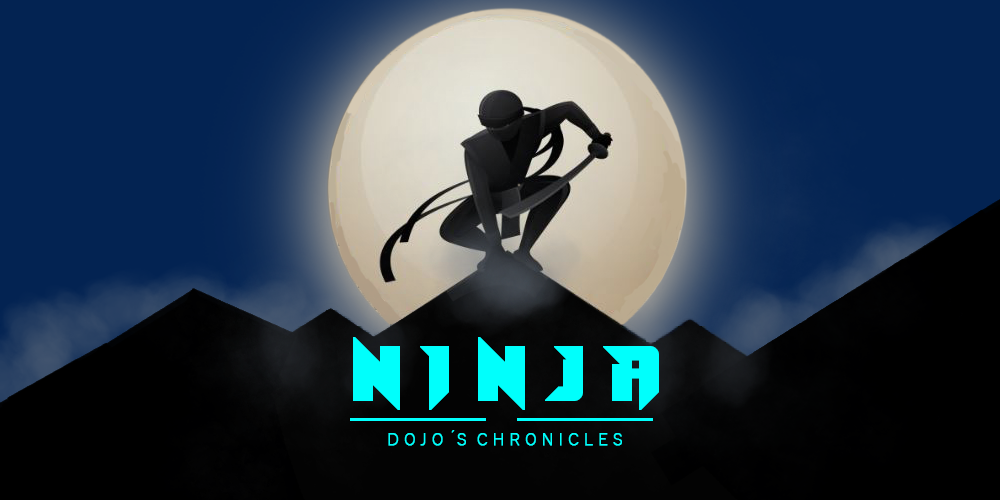
<style>
.page{position:relative;width:1000px;height:500px}
.page>*{position:absolute;margin:0}
.t1{font:72px "Toe-the-Lineless";color:#00fffc;font-weight:bold}
.t2{font:16px "YuGothic-Light";color:#00fffc;font-weight:bold}
</style>
<div class="page">
<p class="t1" style="left:353px;top:337px;width:306px;height:73px">N I N J A</p>
<p class="t2" style="left:388px;top:430px;width:234px;height:16px">D O J O ´S  C H R O N I C L E S</p>
</div>
